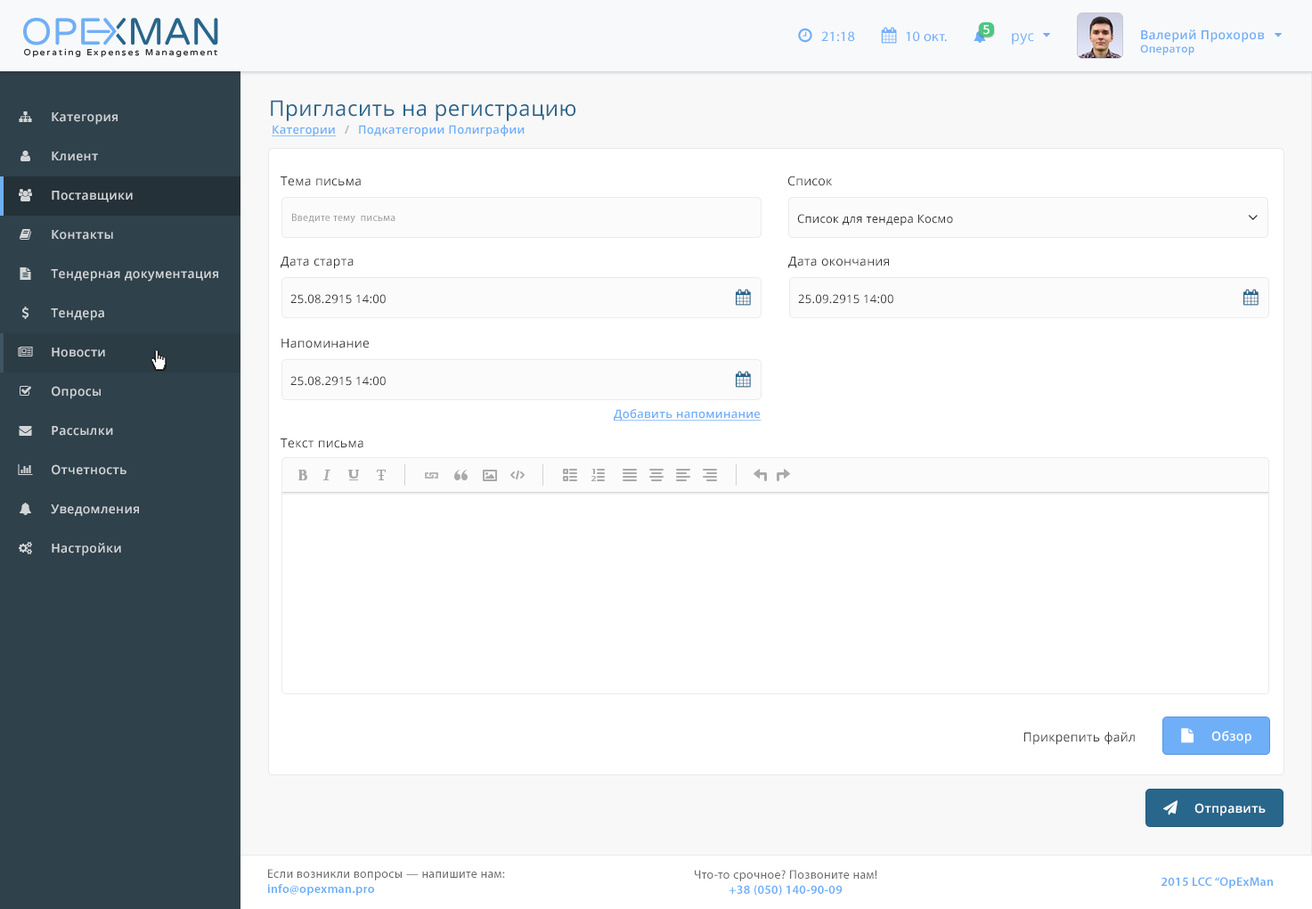
<style>
.page{position:relative;width:1312px;height:909px;background:#ffffff}
.page>*{position:absolute;margin:0}
.t1{font:12.4px "OpenSans-Semibold";letter-spacing:0.025em;color:#ffffff}
.t2{font:12.4px "OpenSans-Semibold";letter-spacing:0.025em;color:#6eaef7}
.t3{font:10.7px "OpenSans-Semibold";letter-spacing:0.025em;color:#6eaef7}
.t4{font:14.2px "MyriadPro-Regular";letter-spacing:0.025em;color:#6faff8}
.t5{font:14.2px "OpenSans";letter-spacing:0.025em;color:#6eaff8}
.t6{font:21.3px "OpenSans";letter-spacing:0.025em;color:#29658b}
.t7{font:12.4px "OpenSans-Semibold";letter-spacing:0.025em;color:#d2d5d7}
.t8{font:11.5px "OpenSans-Semibold";letter-spacing:0.025em;color:#6faff8;text-decoration:underline}
.t9{font:11.5px "OpenSans-Semibold";letter-spacing:0.025em;color:#afafaf}
.t10{font:11.5px "OpenSans-Semibold";letter-spacing:0.025em;color:#6faff8}
.t11{font:12.4px "OpenSans";letter-spacing:0.025em;color:#373838}
.t12{font:10.7px "MyriadPro-Regular";letter-spacing:0.025em;color:#999999}
.t13{font:11.5px "OpenSans";letter-spacing:0.025em;color:#333333}
.t14{font:12.4px "MyriadPro-Regular";letter-spacing:0.025em;color:#696969}
.t15{font:12.4px "MyriadPro-Semibold";letter-spacing:0.025em;color:#6eaef8}
</style>
<div class="page">
<p class="t1" style="left:984px;top:25px;width:6px;height:10px">5</p>
<p class="t2" style="left:1140px;top:29px;width:125px;height:26px">Валерий Прохоров<br><span class="t3">Оператор</span></p>
<p class="t4" style="left:821px;top:31px;width:34px;height:11px">21:18</p>
<p class="t4" style="left:906px;top:31px;width:41px;height:11px">10 окт.</p>
<p class="t5" style="left:1012px;top:33px;width:22px;height:12px">рус</p>
<p class="t6" style="left:271px;top:100px;width:305px;height:21px">Пригласить на регистрацию</p>
<p class="t7" style="left:52px;top:112px;width:66px;height:13px">Категория</p>
<p class="t8" style="left:272px;top:125px;width:65px;height:11px">Категории</p>
<p class="t9" style="left:345px;top:125px;width:4px;height:9px">/</p>
<p class="t10" style="left:359px;top:125px;width:166px;height:11px">Подкатегории Полиграфии</p>
<p class="t7" style="left:52px;top:151px;width:46px;height:10px">Клиент</p>
<p class="t11" style="left:281px;top:176px;width:80px;height:10px">Тема письма</p>
<p class="t11" style="left:788px;top:176px;width:44px;height:10px">Список</p>
<p class="t7" style="left:52px;top:191px;width:81px;height:11px">Поставщики</p>
<p class="t12" style="left:292px;top:213px;width:104px;height:11px">Введите тему  письма</p>
<p class="t13" style="left:797px;top:214px;width:156px;height:11px">Список для тендера Космо</p>
<p class="t7" style="left:52px;top:230px;width:61px;height:10px">Контакты</p>
<p class="t11" style="left:281px;top:257px;width:73px;height:12px">Дата старта</p>
<p class="t11" style="left:788px;top:257px;width:101px;height:11px">Дата окончания</p>
<p class="t7" style="left:51px;top:269px;width:167px;height:13px">Тендерная документация</p>
<p class="t13" style="left:290px;top:294px;width:96px;height:10px">25.08.2915 14:00</p>
<p class="t13" style="left:798px;top:294px;width:96px;height:10px">25.09.2915 14:00</p>
<p class="t7" style="left:51px;top:308px;width:53px;height:13px">Тендера</p>
<p class="t11" style="left:282px;top:339px;width:87px;height:9px">Напоминание</p>
<p class="t7" style="left:52px;top:347px;width:53px;height:10px">Новости</p>
<p class="t13" style="left:290px;top:376px;width:96px;height:10px">25.08.2915 14:00</p>
<p class="t7" style="left:52px;top:386px;width:49px;height:13px">Опросы</p>
<p class="t8" style="left:614px;top:409px;width:148px;height:11px">Добавить напоминание</p>
<p class="t7" style="left:52px;top:426px;width:61px;height:10px">Рассылки</p>
<p class="t11" style="left:281px;top:438px;width:82px;height:10px">Текст письма</p>
<p class="t7" style="left:52px;top:464px;width:75px;height:11px">Отчетность</p>
<p class="t7" style="left:51px;top:504px;width:88px;height:12px">Уведомления</p>
<p class="t7" style="left:52px;top:543px;width:69px;height:13px">Настройки</p>
<p class="t11" style="left:1025px;top:731px;width:110px;height:14px">Прикрепить файл</p>
<p class="t1" style="left:1212px;top:731px;width:40px;height:13px">Обзор</p>
<p class="t1" style="left:1195px;top:803px;width:71px;height:13px">Отправить</p>
<p class="t14" style="left:267px;top:869px;width:238px;height:26px">Если возникли вопросы — напишите нам:<br><span class="t15">info@opexman.pro</span></p>
<p class="t14" style="left:695px;top:869px;width:183px;height:26px;text-align:center">Что-то срочное? Позвоните нам!<br><span class="t15">+38 (050) 140-90-09</span></p>
<p class="t15" style="left:1162px;top:877px;width:111px;height:11px">2015 LCC “OpExMan</p>
</div>
